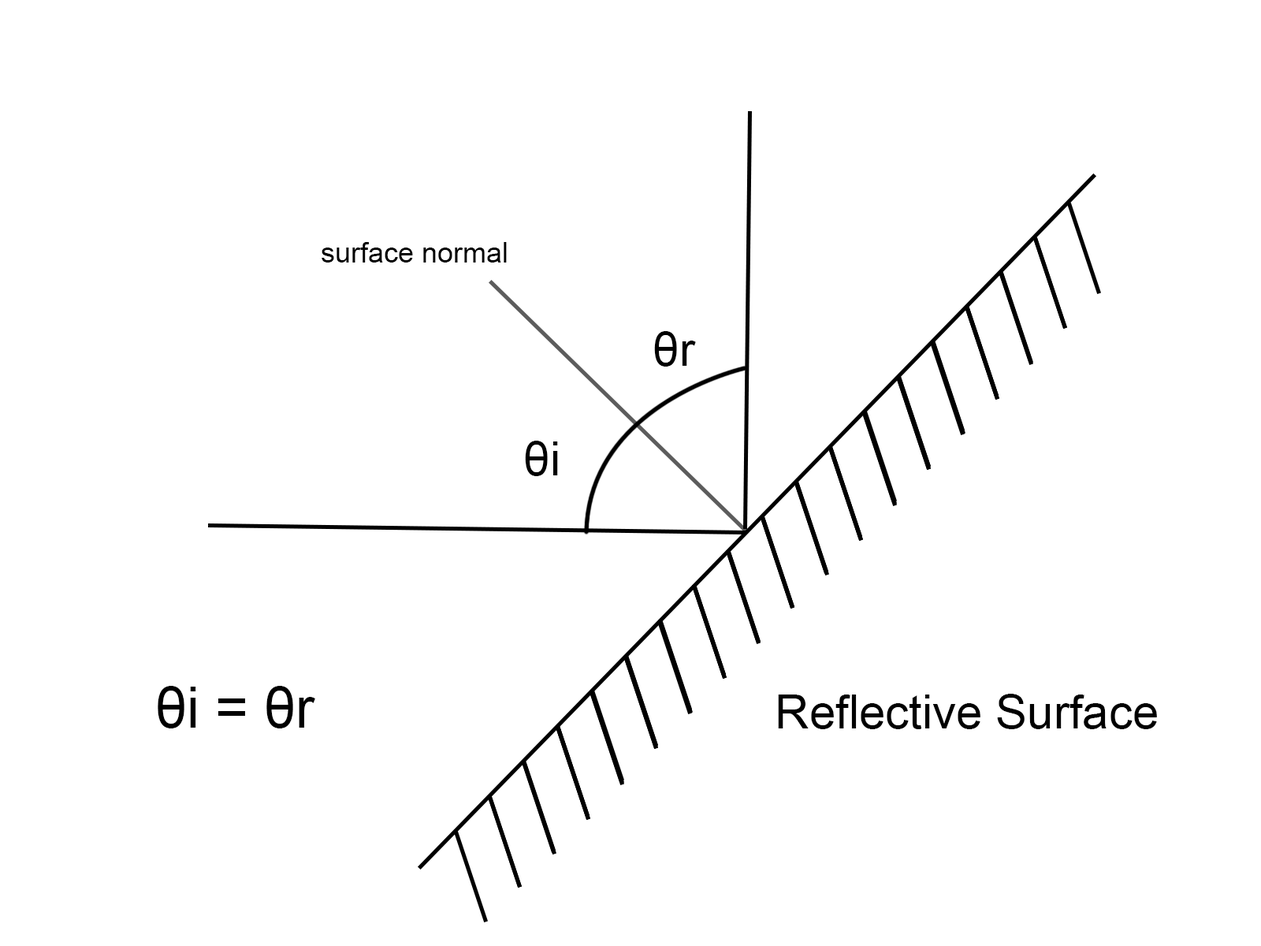
<style>
.page{position:relative;width:1261px;height:946px;background:#ffffff}
.page>*{position:absolute;margin:0}
.t1{font:28.4px "ArialMT";color:#000000}
.t2{font:47.3px "ArialMT";color:#000000}
.t3{font:56.7px "ArialMT";color:#000000}
</style>
<div class="page">
<p class="t1" style="left:322px;top:242px;width:185px;height:20px">surface normal</p>
<p class="t2" style="left:654px;top:331px;width:42px;height:35px">θr</p>
<p class="t2" style="left:525px;top:441px;width:33px;height:35px">θi</p>
<p class="t3" style="left:158px;top:686px;width:157px;height:42px">θi = θr</p>
<p class="t2" style="left:778px;top:694px;width:379px;height:35px">Reflective Surface</p>
</div>
